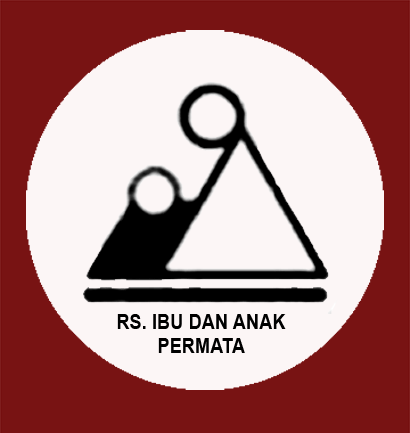
<style>
.page{position:relative;width:410px;height:433px;background:#fcf6f6}
.page>*{position:absolute;margin:0}
.t1{font:20.5px "Arial-BoldMT";color:#000000;scale:0.89 1}
</style>
<div class="page">
<p class="t1" style="left:117px;top:314px;width:169px;height:39px;text-align:center">RS. IBU DAN ANAK<br>PERMATA</p>
</div>
